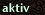
<style>
.page{position:relative;width:45px;height:15px}
.page>*{position:absolute;margin:0}
.t1{font:12px "StoneSansSemITCTTSemi";color:#d8ffe1}
</style>
<div class="page">
<p class="t1" style="left:2px;top:3px;width:28px;height:9px">aktiv</p>
</div>
